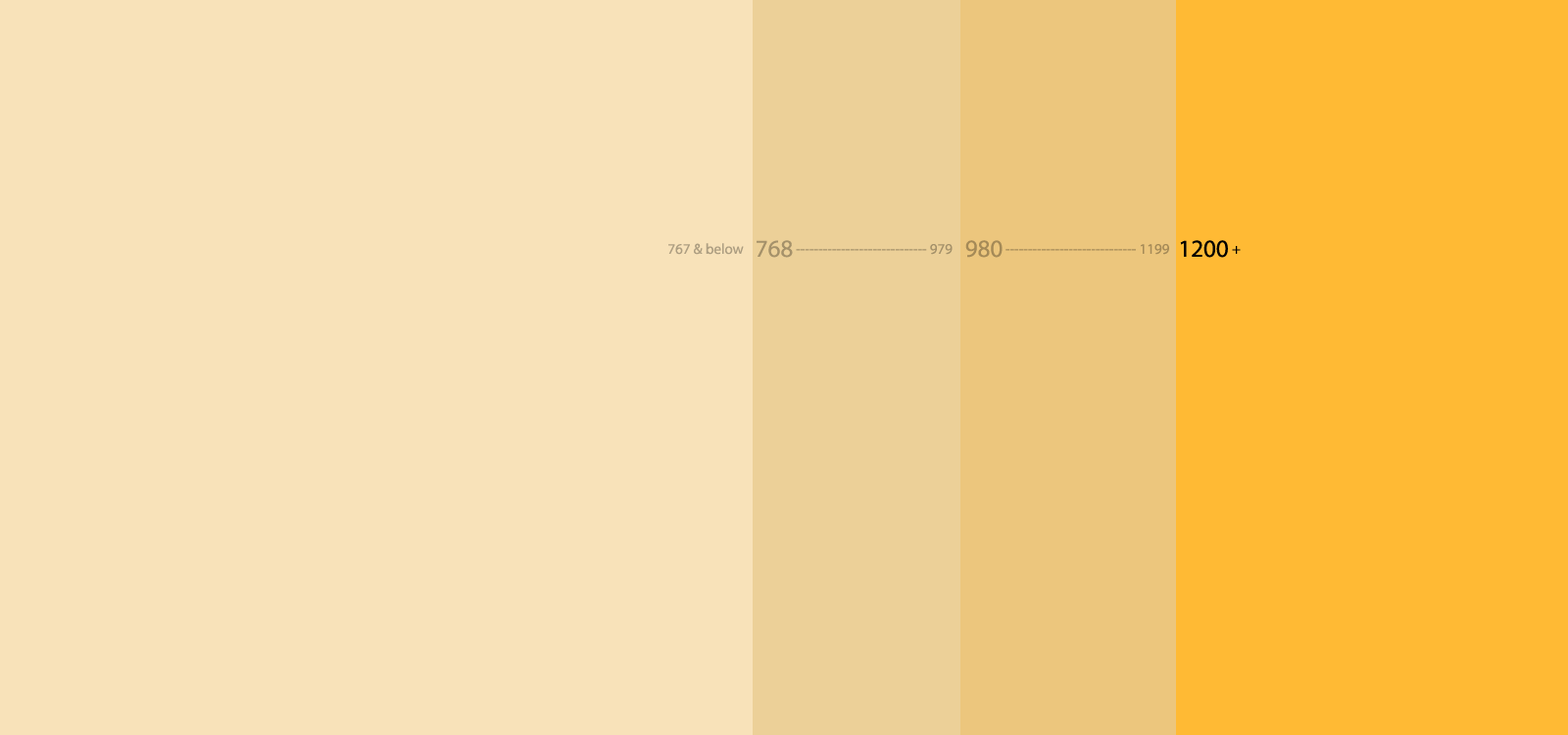
<style>
.page{position:relative;width:1568px;height:735px;background:#f8e2b9}
.page>*{position:absolute;margin:0}
.t1{font:14.7px "MyriadPro-Regular";color:#ad9e81}
.t2{font:24.5px "MyriadPro-Regular";color:#a5916a}
.t3{font:14.7px "MyriadPro-Regular";color:#a5916a}
.t4{font:24.5px "MyriadPro-Regular";color:#a58a57}
.t5{font:14.7px "MyriadPro-Regular";color:#a58a57}
.t6{font:24.5px "MyriadPro-Regular";color:#000000}
.t7{font:14.7px "MyriadPro-Regular";color:#000000}
</style>
<div class="page">
<p class="t1" style="left:668px;top:243px;width:76px;height:12px">767 &amp; below</p>
<p class="t2" style="left:757px;top:240px;width:36px;height:18px">768</p>
<p class="t3" style="left:796px;top:244px;width:157px;height:11px">----------------------------- 979</p>
<p class="t4" style="left:965px;top:240px;width:38px;height:18px">980</p>
<p class="t5" style="left:1005px;top:244px;width:164px;height:11px">----------------------------- 1199</p>
<p class="t6" style="left:1180px;top:240px;width:48px;height:18px">1200</p>
<p class="t7" style="left:1232px;top:246px;width:9px;height:8px">+</p>
</div>
